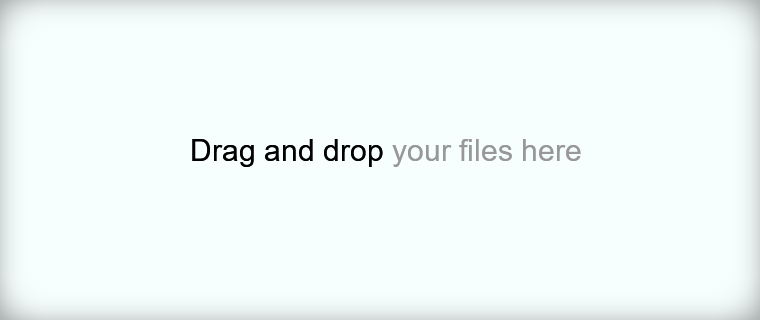
<style>
.page{position:relative;width:760px;height:320px;background:#f6fffe}
.page>*{position:absolute;margin:0}
.t1{font:30px "ArialMT";color:#989898}
.t2{font:30px "ArialMT";color:#000000}
</style>
<div class="page">
<p class="t1" style="left:192px;top:139px;width:389px;height:28px"><span class="t2">Drag and drop </span>your files here</p>
</div>
